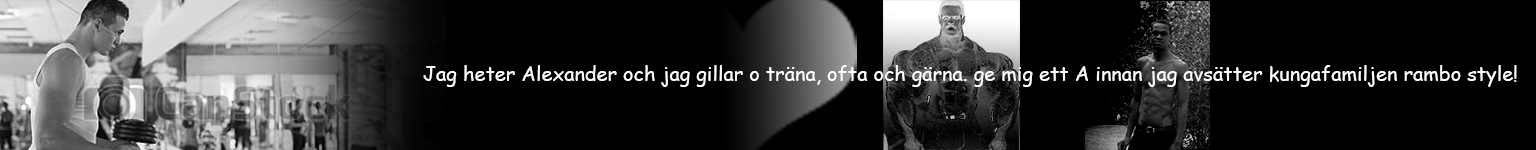
<style>
.page{position:relative;width:1536px;height:150px;background:#000000}
.page>*{position:absolute;margin:0}
.t1{font:20px "ComicSansMS";color:#fefefe}
</style>
<div class="page">
<p class="t1" style="left:423px;top:65px;width:1094px;height:22px">Jag heter Alexander och jag gillar o träna, ofta och gärna. ge mig ett A innan jag avsätter kungafamiljen rambo style!</p>
</div>
